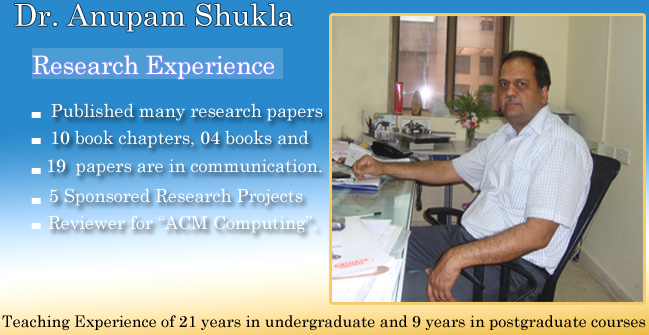
<style>
.page{position:relative;width:649px;height:335px}
.page>*{position:absolute;margin:0}
.t1{font:30px "Century";color:#ffffff}
.t2{font:25.2px "Century";color:#ffffff}
.t3{font:18px "Century";color:#ffffff}
.t4{font:16px "Century";color:#000000}
</style>
<div class="page">
<p class="t1" style="left:15px;top:3px;width:279px;height:29px">Dr. Anupam Shukla</p>
<p class="t2" style="left:32px;top:55px;width:242px;height:24px">Research Experience</p>
<p class="t3" style="left:51px;top:103px;width:272px;height:18px">Published many research papers</p>
<p class="t3" style="left:52px;top:130px;width:257px;height:18px">10 book chapters, 04 books and</p>
<p class="t3" style="left:48px;top:159px;width:274px;height:17px">19  papers are in communication.</p>
<p class="t3" style="left:50px;top:188px;width:253px;height:18px">5 Sponsored Research Projects</p>
<p class="t3" style="left:48px;top:215px;width:269px;height:18px">Reviewer for “ACM Computing”.</p>
<p class="t4" style="left:2px;top:315px;width:644px;height:15px">Teaching Experience of 21 years in undergraduate and 9 years in postgraduate courses</p>
</div>
